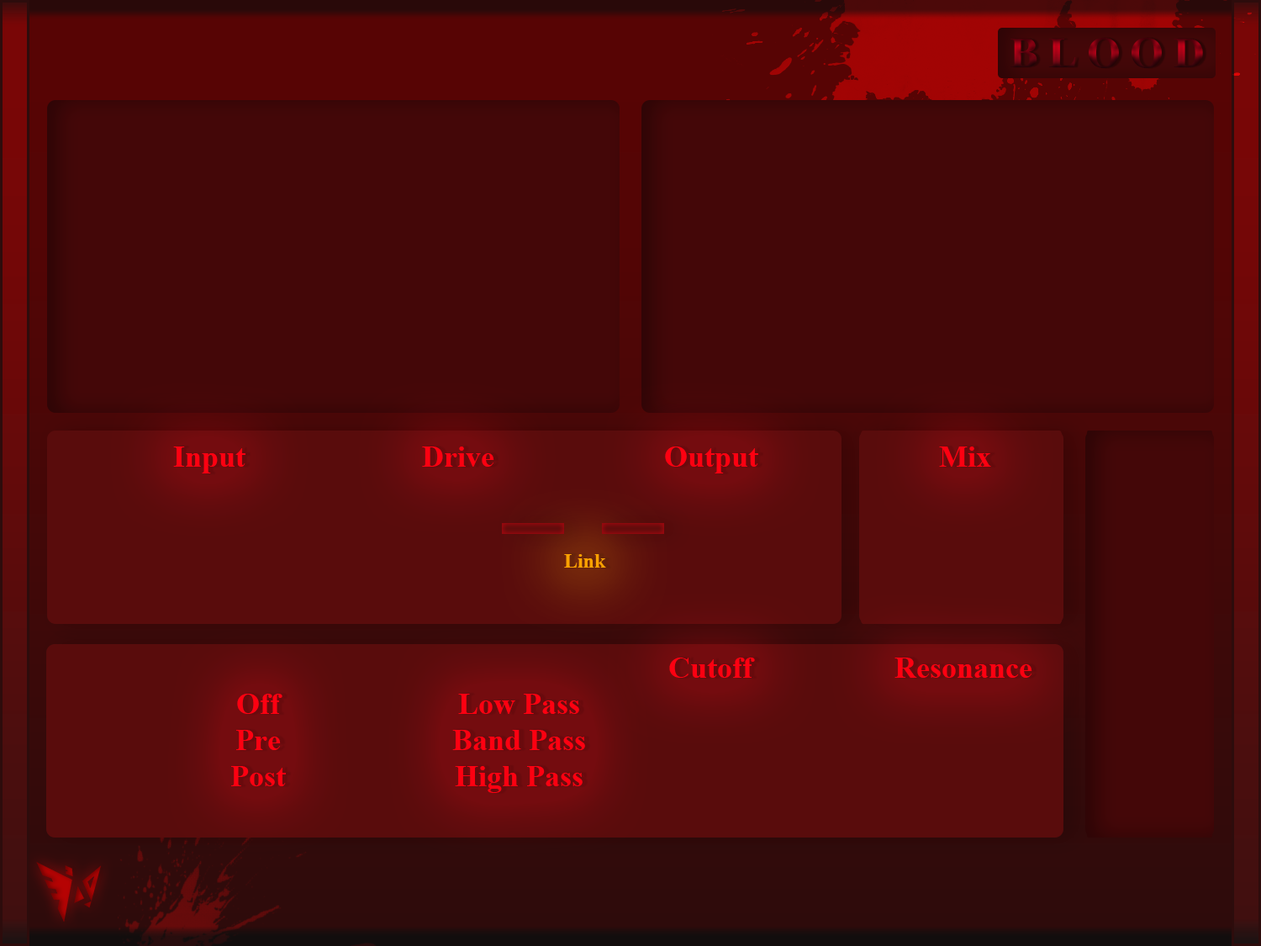
<style>
.page{position:relative;width:1261px;height:946px;background:#440708}
.page>*{position:absolute;margin:0}
.t1{font:42.5px "TimesNewRomanPS-BoldMT";letter-spacing:0.24em}
.t2{font:30.3px "TimesNewRomanPS-BoldMT";color:#fd0011}
.t3{font:20.2px "TimesNewRomanPS-BoldMT";color:#ffa200}
</style>
<div class="page">
<p class="t1" style="left:1010px;top:38px;width:193px;height:30px">BLOOD</p>
<p class="t2" style="left:173px;top:446px;width:72px;height:27px">Input</p>
<p class="t2" style="left:422px;top:446px;width:72px;height:21px">Drive</p>
<p class="t2" style="left:665px;top:446px;width:93px;height:27px">Output</p>
<p class="t2" style="left:939px;top:446px;width:52px;height:21px">Mix</p>
<p class="t3" style="left:564px;top:554px;width:42px;height:13px">Link</p>
<p class="t2" style="left:669px;top:657px;width:86px;height:21px">Cutoff</p>
<p class="t2" style="left:894px;top:657px;width:138px;height:21px">Resonance</p>
<p class="t2" style="left:231px;top:694px;width:55px;height:92px;text-align:center">Off<br>Pre<br>Post</p>
<p class="t2" style="left:452px;top:694px;width:133px;height:99px;text-align:center">Low Pass<br>Band Pass<br>High Pass</p>
</div>
